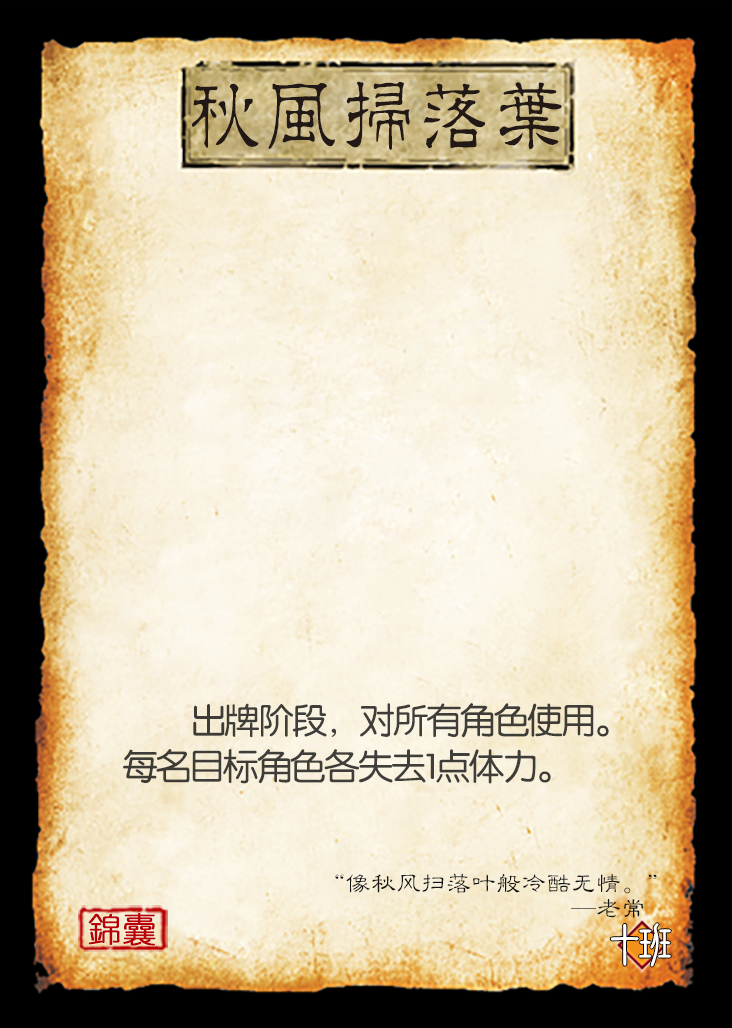
<style>
.page{position:relative;width:732px;height:1028px}
.page>*{position:absolute;margin:0}
.t1{font:80.4px "JMFLS_GBK";color:#221815;scale:0.95 1}
.t2{font:35.4px/45.8px "FZY3JW--GB1-0";letter-spacing:-0.05em;color:#3e3d38}
.t3{font:25px/25px "FZLBJW--GB1-0";color:#151515}
.t4{font:33.3px "YouYuan";color:#ba0007;font-weight:bold}
.t5{font:50px "DFNewChuan-W5-WINP-BF";letter-spacing:-0.4em;color:#ffffff}
</style>
<div class="page">
<p class="t1" style="left:192px;top:81px;width:370px;height:69px">秋風掃落葉</p>
<p class="t2" style="left:123px;top:703px;width:486px;height:81px">出牌阶段，对所有角色使用。每名目标角色各失去1点体力。</p>
<p class="t3" style="left:335px;top:873px;width:322px;height:45px;text-align:right">“像秋风扫落叶般冷酷无情。”<br>                                      —老常</p>
<p class="t4" style="left:88px;top:913px;width:68px;height:33px">錦囊</p>
<p class="t5" style="left:611px;top:923px;width:60px;height:44px">十班</p>
</div>
